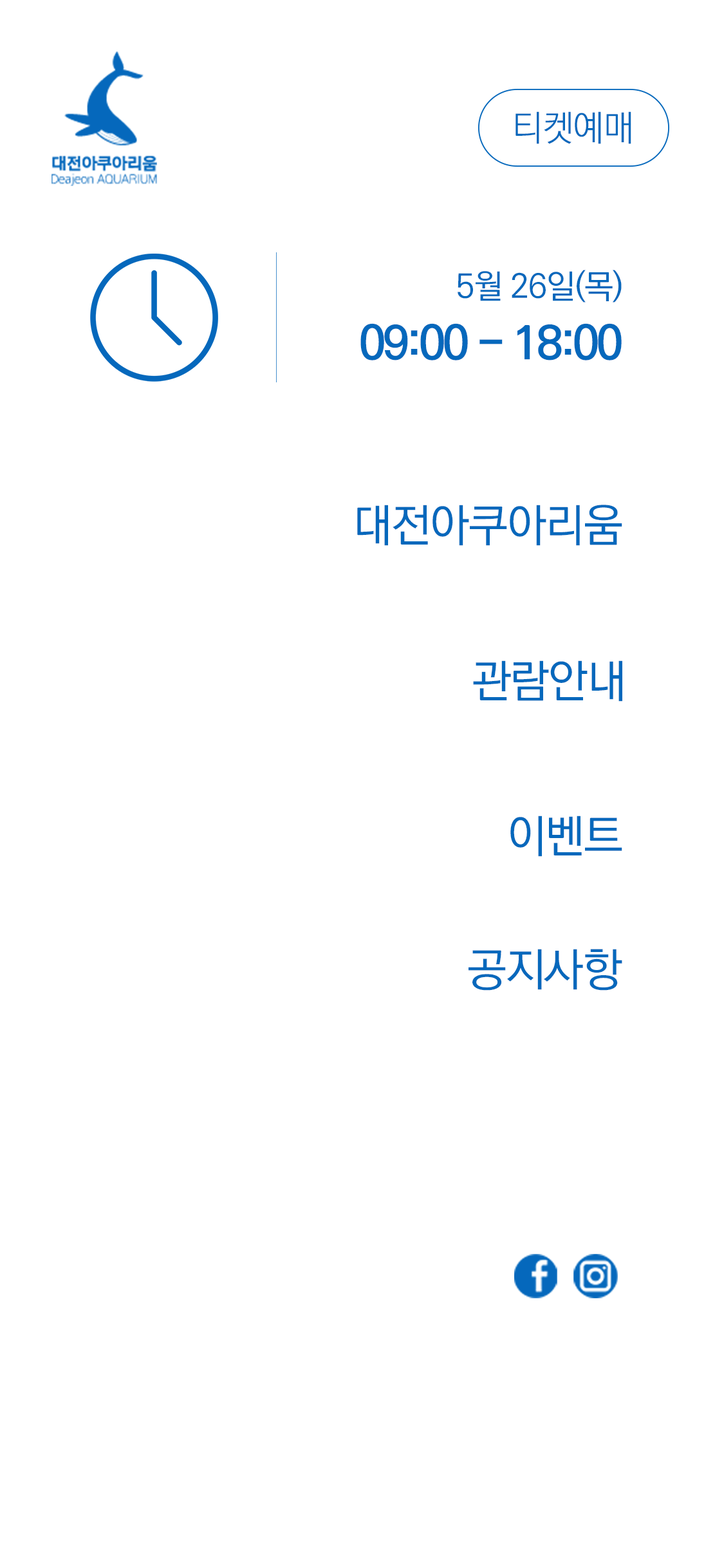
<style>
.page{position:relative;width:724px;height:1568px;background:#ffffff}
.page>*{position:absolute;margin:0}
.t1{font:35.9px "KoPubWorldDotumPL";letter-spacing:-0.025em;color:#0568bc}
.t2{font:33.5px "KoPubWorldDotumPM";letter-spacing:-0.025em;color:#0568bc}
.t3{font:46.3px "KoPubWorldDotumPB";letter-spacing:-0.05em;color:#0568bc}
.t4{font:45.4px "KoPubWorldDotumPM";letter-spacing:-0.025em;color:#0568bc}
</style>
<div class="page">
<p class="t1" style="left:516px;top:111px;width:115px;height:33px">티켓예매</p>
<p class="t2" style="left:458px;top:270px;width:164px;height:33px">5월 26일(목)</p>
<p class="t3" style="left:360px;top:323px;width:262px;height:37px">09:00 - 18:00</p>
<p class="t4" style="left:357px;top:505px;width:265px;height:41px">대전아쿠아리움</p>
<p class="t4" style="left:473px;top:660px;width:149px;height:42px">관람안내</p>
<p class="t4" style="left:510px;top:816px;width:112px;height:41px">이벤트</p>
<p class="t4" style="left:469px;top:949px;width:153px;height:42px">공지사항</p>
</div>
